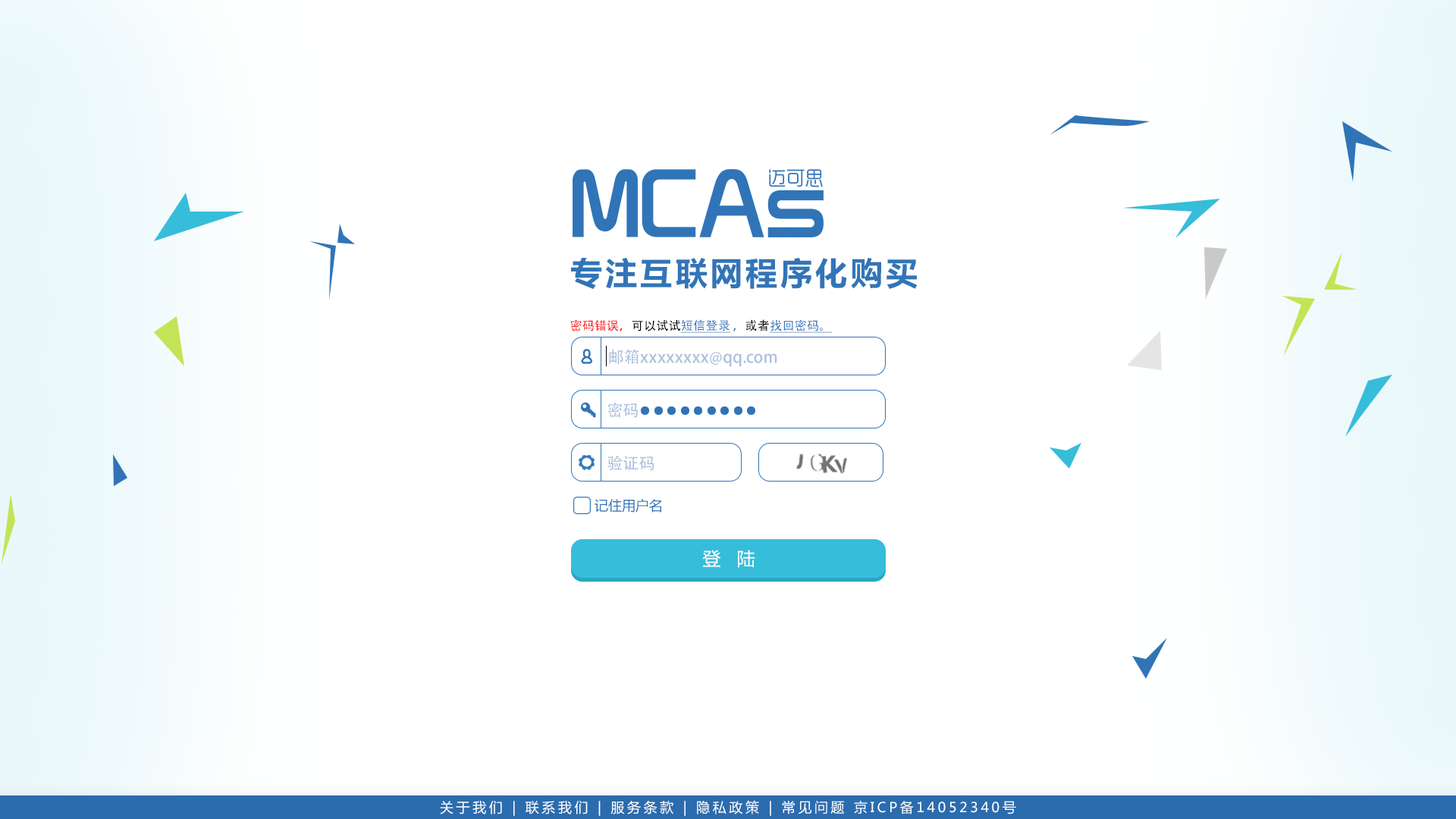
<style>
.page{position:relative;width:1456px;height:819px;background:#ffffff}
.page>*{position:absolute;margin:0}
.t1{font:31.8px "MicrosoftYaHei-Bold";letter-spacing:0.1em;color:#3175b8}
.t2{font:12.1px "AdobeHeitiStd-Regular";color:#ff0000}
.t3{font:12.1px "AdobeHeitiStd-Regular";color:#000000}
.t4{font:12.1px "AdobeHeitiStd-Regular";color:#3075b8;text-decoration:underline}
.t5{font:12.1px "AdobeHeitiStd-Regular";color:#3074b8}
.t6{font:12.1px "AdobeHeitiStd-Regular";color:#3175b8;text-decoration:underline}
.t7{font:16px "AdobeHeitiStd-Regular";color:#acc1dd}
.t8{font:13.6px "MicrosoftYaHei";color:#3074b8}
.t9{font:18.2px "MicrosoftYaHei";color:#ffffff}
.t10{font:13.6px "MicrosoftYaHei";letter-spacing:0.2em;color:#ffffff}
</style>
<div class="page">
<p class="t1" style="left:571px;top:257px;width:347px;height:32px">专注互联网程序化购买</p>
<p class="t2" style="left:570px;top:319px;width:262px;height:14px">密码错误，<span class="t3">可以试试</span><span class="t4">短信登录</span><span class="t5"> ，</span><span class="t3">或者</span><span class="t6">找回密码。</span></p>
<p class="t7" style="left:609px;top:349px;width:168px;height:18px">邮箱xxxxxxxx@qq.com</p>
<p class="t7" style="left:607px;top:403px;width:31px;height:15px">密码</p>
<p class="t7" style="left:607px;top:455px;width:47px;height:16px">验证码</p>
<p class="t8" style="left:595px;top:499px;width:66px;height:14px">记住用户名</p>
<p class="t9" style="left:702px;top:550px;width:53px;height:18px">登   陆</p>
<p class="t10" style="left:440px;top:800px;width:576px;height:16px">关于我们 | 联系我们 | 服务条款 | 隐私政策 | 常见问题 京ICP备14052340号</p>
</div>
